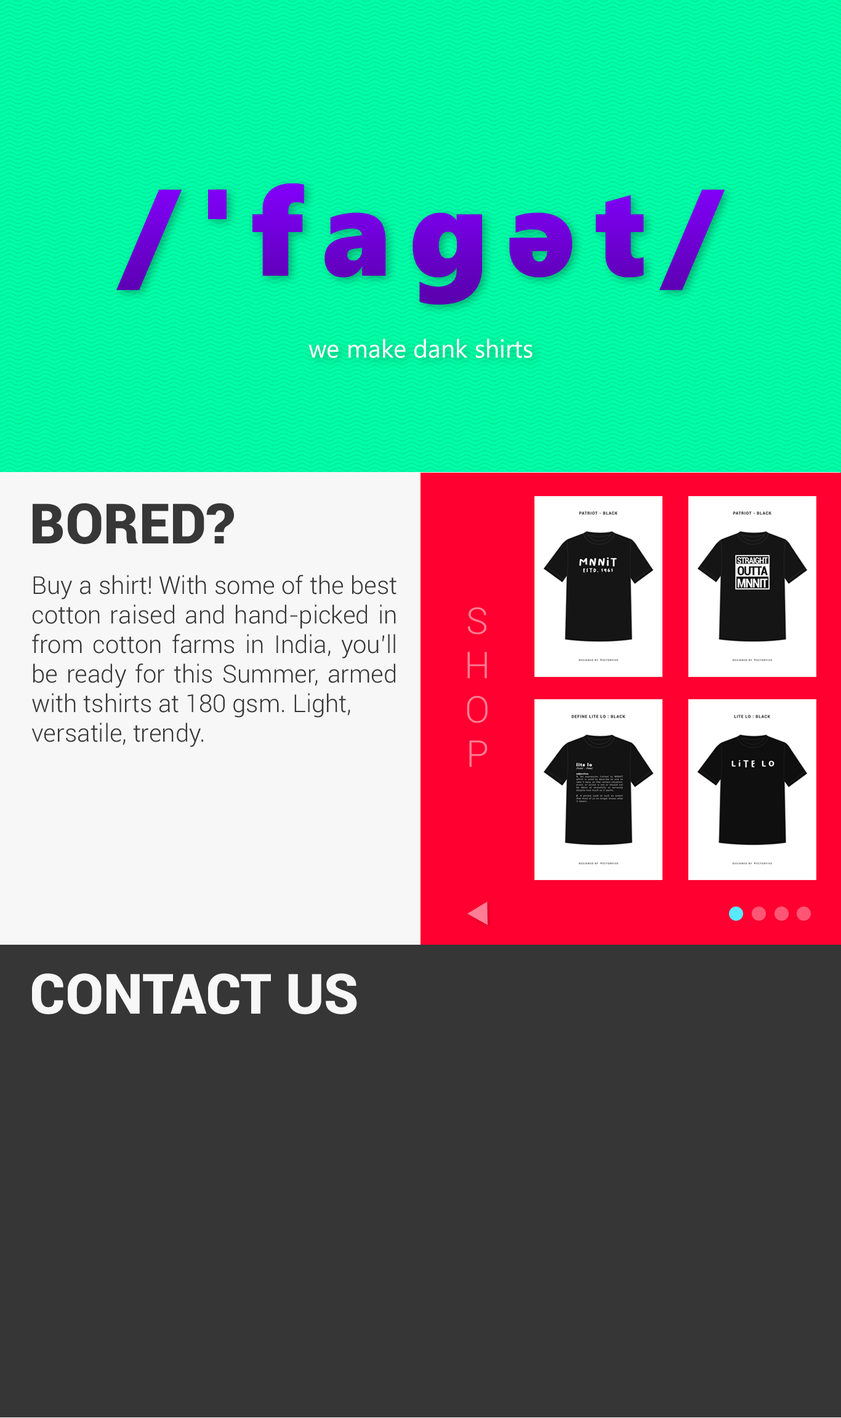
<style>
.page{position:relative;width:841px;height:1418px;background:#363636}
.page>*{position:absolute;margin:0}
.t1{font:25.1px "SegoeUI";color:#ffffff}
.t2{font:55.7px "Roboto-Black";color:#373737}
.t3{font:24.6px "Roboto-Light";color:#373737}
.t4{font:36.9px "Roboto-Light";letter-spacing:-0.065em;color:#ff7d95}
.t5{font:55.7px "Roboto-Black";color:#f7f7f7}
</style>
<div class="page">
<p class="t1" style="left:308px;top:339px;width:224px;height:19px">we make dank shirts</p>
<p class="t2" style="left:33px;top:503px;width:201px;height:41px">BORED?</p>
<p class="t3" style="left:31px;top:575px;width:365px;height:172px;text-align:justify">Buy a shirt! With some of the best<br>cotton raised and hand-picked in<br>from cotton farms in India, you’ll be ready for this Summer, armed <br>with tshirts at 180 gsm. Light, versatile, trendy.</p>
<p class="t4" style="left:467px;top:607px;width:21px;height:160px;text-align:center">S<br>H<br>O<br>P</p>
<p class="t5" style="left:32px;top:973px;width:325px;height:41px">CONTACT US</p>
</div>
